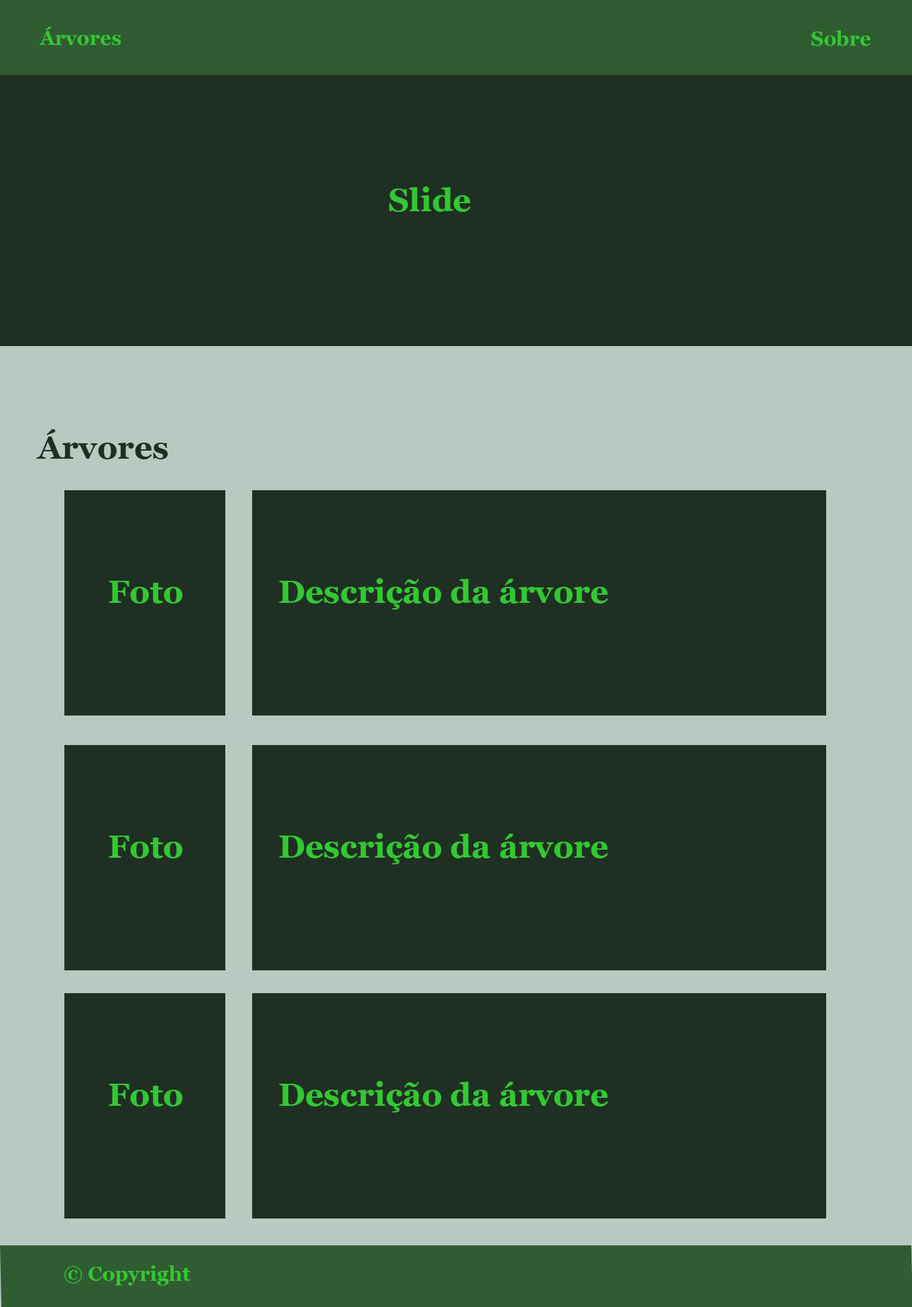
<style>
.page{position:relative;width:912px;height:1307px;background:#202f23}
.page>*{position:absolute;margin:0}
.t1{font:20.1px "Georgia-Bold";color:#32c832}
.t2{font:32.2px "Georgia-Bold";color:#32c832}
.t3{font:32.2px "Georgia-Bold";color:#202f23}
</style>
<div class="page">
<p class="t1" style="left:39px;top:26px;width:82px;height:20px">Árvores</p>
<p class="t1" style="left:812px;top:30px;width:59px;height:16px">Sobre</p>
<p class="t2" style="left:389px;top:186px;width:82px;height:26px">Slide</p>
<p class="t3" style="left:36px;top:429px;width:132px;height:30px">Árvores</p>
<p class="t2" style="left:109px;top:581px;width:73px;height:23px">Foto</p>
<p class="t2" style="left:279px;top:578px;width:329px;height:32px">Descrição da árvore</p>
<p class="t2" style="left:279px;top:833px;width:329px;height:32px">Descrição da árvore</p>
<p class="t2" style="left:109px;top:836px;width:73px;height:23px">Foto</p>
<p class="t2" style="left:109px;top:1084px;width:73px;height:23px">Foto</p>
<p class="t2" style="left:279px;top:1081px;width:329px;height:32px">Descrição da árvore</p>
<p class="t1" style="left:64px;top:1266px;width:126px;height:20px">© Copyright</p>
</div>
